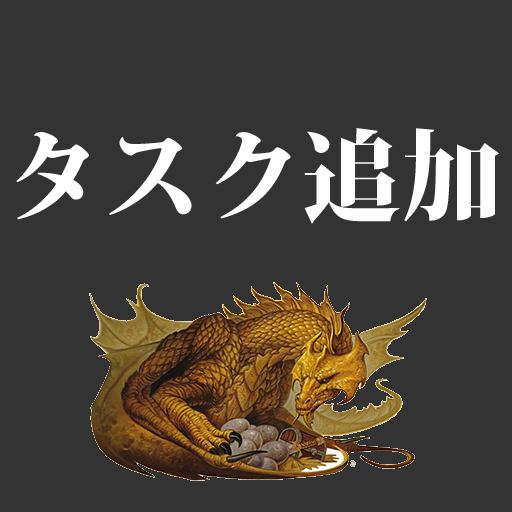
<style>
.page{position:relative;width:512px;height:512px;background:#333333}
.page>*{position:absolute;margin:0}
.t1{font:100px "KozMinPr6N-Heavy";color:#ffffff}
</style>
<div class="page">
<p class="t1" style="left:16px;top:128px;width:483px;height:96px">タスク追加</p>
</div>
